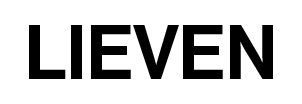
<style>
.page{position:relative;width:302px;height:104px;background:#ffffff}
.page>*{position:absolute;margin:0}
.t1{font:75px "NHaasGroteskDSPro-65Md";color:#000000}
</style>
<div class="page">
<p class="t1" style="left:29px;top:25px;width:244px;height:54px">LIEVEN</p>
</div>
